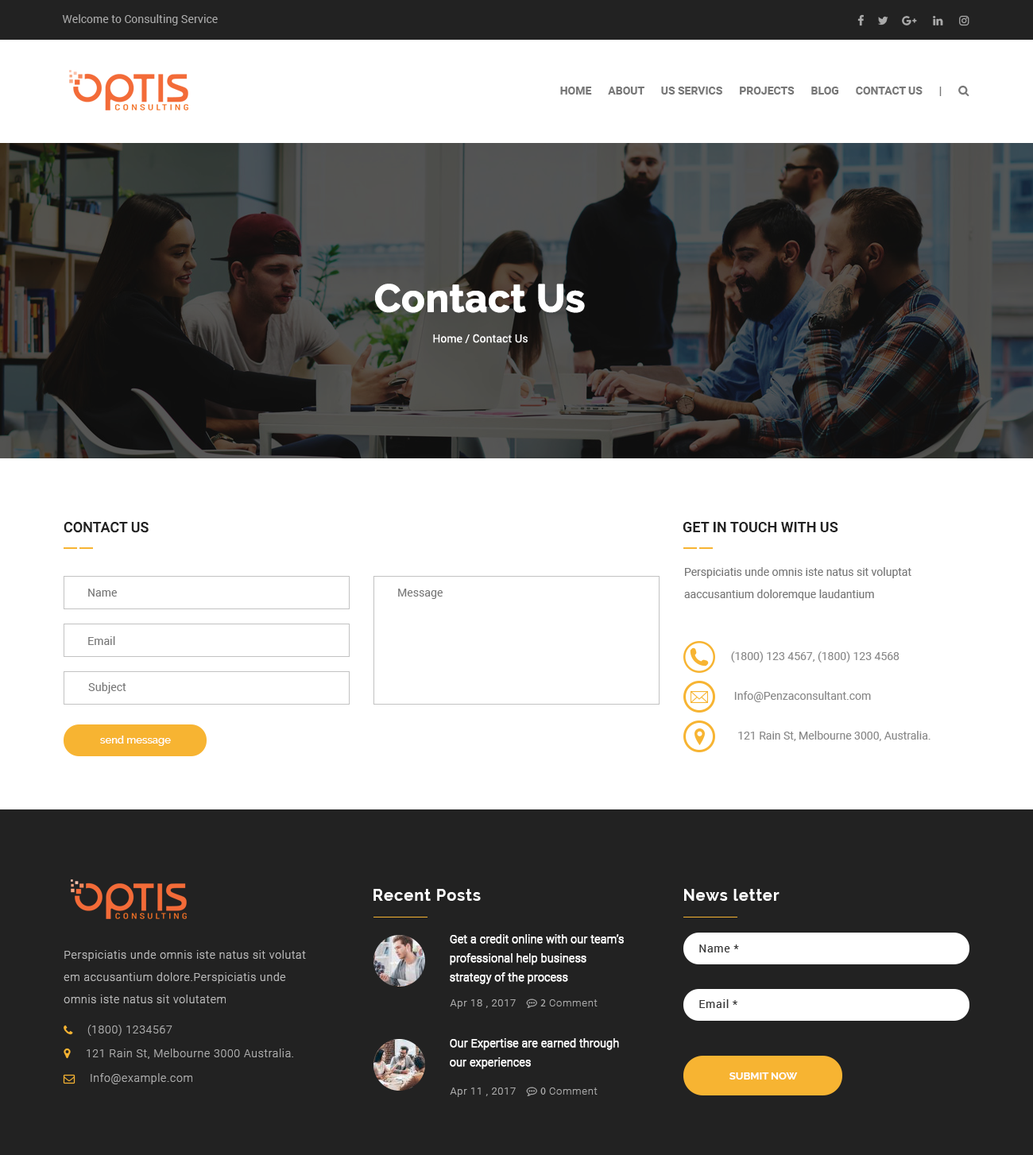
<style>
.page{position:relative;width:1033px;height:1155px;background:#ffffff}
.page>*{position:absolute;margin:0}
.t1{font:11.1px "Roboto-Regular";color:#aaaaaa}
.t2{font:38.1px "Raleway-Bold";color:#ffffff;font-weight:bold}
.t3{font:11.1px "Roboto-Regular";color:#ffffff}
.t4{font:14.3px "Roboto-Medium";color:#222222;text-transform:uppercase}
.t5{font:14.3px "Roboto-Bold";color:#222222;text-transform:uppercase}
.t6{font:11.1px/22.2px "Roboto-Regular";color:#777777}
.t7{font:11.1px "Roboto-Regular";color:#777777}
.t8{font:11.1px "Roboto-Regular";color:#888888}
.t9{font:10.3px "Raleway-Medium";color:#ffffff}
.t10{font:15.9px "Raleway-Bold";letter-spacing:0.05em;color:#ffffff}
.t11{font:15.9px "Raleway-Bold";letter-spacing:0.05em;color:#ffffff;text-transform:uppercase}
.t12{font:11.1px/19.1px "Roboto-Light";color:#ffffff;font-weight:bold}
.t13{font:11.1px/22.2px "Roboto-Light";letter-spacing:0.05em;color:#bababa}
.t14{font:11.1px "Roboto-Regular";letter-spacing:0.05em;color:#333333}
.t15{font:10.3px "Roboto-Light";letter-spacing:0.05em;color:#ababab}
.t16{font:11.1px "Roboto-Light";letter-spacing:0.05em;color:#ababab}
.t17{font:10.3px "Raleway-Bold";color:#ffffff}
</style>
<div class="page">
<p class="t1" style="left:62px;top:14px;width:156px;height:11px">Welcome to Consulting Service</p>
<p class="t2" style="left:375px;top:284px;width:210px;height:29px">Contact Us</p>
<p class="t3" style="left:433px;top:334px;width:94px;height:9px">Home / Contact Us</p>
<p class="t4" style="left:64px;top:522px;width:85px;height:11px">Contact Us</p>
<p class="t5" style="left:682px;top:522px;width:156px;height:10px">Get in Touch with us</p>
<p class="t6" style="left:684px;top:567px;width:227px;height:33px">Perspiciatis unde omnis iste natus sit voluptat aaccusantium doloremque laudantium</p>
<p class="t7" style="left:88px;top:589px;width:29px;height:7px">Name</p>
<p class="t7" style="left:398px;top:589px;width:44px;height:10px">Message</p>
<p class="t7" style="left:88px;top:636px;width:27px;height:9px">Email</p>
<p class="t8" style="left:731px;top:651px;width:168px;height:11px">(1800) 123 4567, (1800) 123 4568</p>
<p class="t7" style="left:88px;top:682px;width:38px;height:11px">Subject</p>
<p class="t8" style="left:734px;top:691px;width:137px;height:11px">Info@Penzaconsultant.com</p>
<p class="t9" style="left:100px;top:735px;width:71px;height:11px">send message</p>
<p class="t8" style="left:738px;top:731px;width:192px;height:10px">121 Rain St, Melbourne 3000, Australia.</p>
<p class="t10" style="left:373px;top:889px;width:108px;height:12px"><span class="t11">R</span>ecent Posts</p>
<p class="t10" style="left:684px;top:889px;width:95px;height:12px">News letter</p>
<p class="t12" style="left:450px;top:934px;width:173px;height:50px">Get a credit online with our team’s <br>professional help business <br>strategy of the process</p>
<p class="t13" style="left:64px;top:950px;width:242px;height:53px">Perspiciatis unde omnis iste natus sit volutat em accusantium dolore.Perspiciatis unde omnis iste natus sit volutatem</p>
<p class="t14" style="left:699px;top:944px;width:40px;height:8px">Name *</p>
<p class="t15" style="left:450px;top:999px;width:65px;height:10px">Apr 18 , 2017</p>
<p class="t14" style="left:699px;top:999px;width:38px;height:9px">Email *</p>
<p class="t16" style="left:87px;top:1025px;width:85px;height:11px">(1800) 1234567</p>
<p class="t16" style="left:87px;top:1048px;width:206px;height:11px">121 Rain St, Melbourne 3000 Australia.</p>
<p class="t12" style="left:450px;top:1038px;width:169px;height:31px">Our Expertise are earned through <br>our experiences</p>
<p class="t16" style="left:91px;top:1073px;width:101px;height:11px">Info@example.com</p>
<p class="t17" style="left:729px;top:1072px;width:68px;height:7px">SUBMIT NOW</p>
<p class="t15" style="left:450px;top:1087px;width:65px;height:10px">Apr 11 , 2017</p>
</div>
